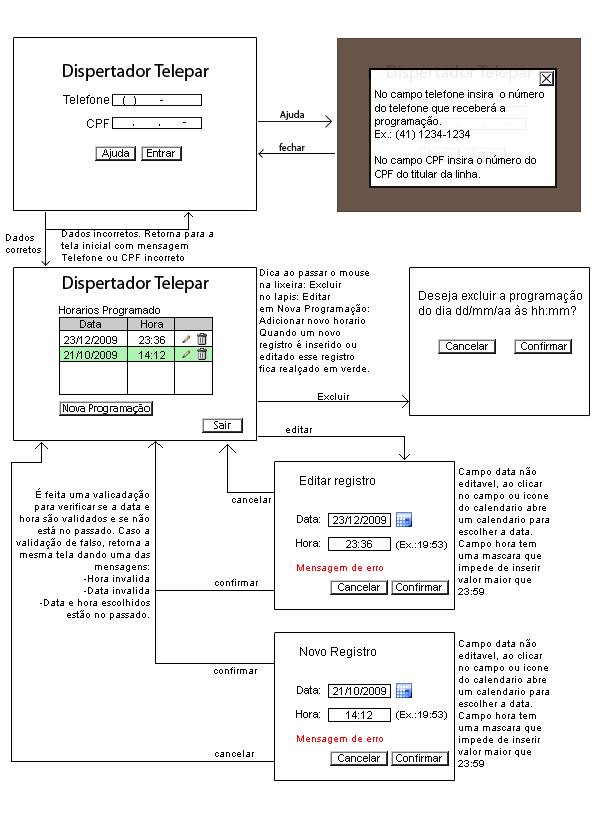
<style>
.page{position:relative;width:595px;height:822px;background:#ffffff}
.page>*{position:absolute;margin:0}
.t1{font:18px "MyriadPro-Regular";color:#000000}
.t2{font:11px "ArialMT";color:#000000}
.t3{font:12px/24px "ArialMT";color:#000000}
.t4{font:12px/24px "MyriadPro-Regular";color:#000000}
.t5{font:12px "MyriadPro-Regular";color:#000000}
.t6{font:10px "MyriadPro-Regular";color:#151414}
.t7{font:12px "MyriadPro-Regular";color:#ededed}
.t8{font:11px "MyriadPro-Regular";color:#ededed}
.t9{font:10px "ArialMT";color:#000000}
.t10{font:12px "ArialMT";color:#000000}
.t11{font:11px "MyriadPro-Regular";color:#000000}
.t12{font:11px/24px "ArialMT";color:#000000}
.t13{font:10px "ArialMT";color:#ff0000}
</style>
<div class="page">
<p class="t1" style="left:63px;top:64px;width:146px;height:17px">Dispertador Telepar</p>
<p class="t2" style="left:375px;top:89px;width:169px;height:89px">No campo telefone insira  o número do telefone que receberá a programação. <br>Ex.: (41) 1234-1234<br><br>No campo CPF insira o número do CPF do titular da linha.</p>
<p class="t3" style="left:63px;top:95px;width:46px;height:33px;text-align:right"><span class="t4"> </span>Telefone<br>CPF</p>
<p class="t5" style="left:123px;top:96px;width:40px;height:10px">(   )         -</p>
<p class="t6" style="left:280px;top:110px;width:24px;height:10px">Ajuda</p>
<p class="t5" style="left:133px;top:122px;width:53px;height:4px">.         .         -</p>
<p class="t7" style="left:457px;top:123px;width:53px;height:4px">.         .         -</p>
<p class="t2" style="left:102px;top:149px;width:27px;height:10px">Ajuda</p>
<p class="t2" style="left:147px;top:149px;width:28px;height:8px">Entrar</p>
<p class="t6" style="left:279px;top:143px;width:26px;height:8px">fechar</p>
<p class="t8" style="left:472px;top:150px;width:27px;height:8px">Entrar</p>
<p class="t9" style="left:61px;top:230px;width:152px;height:31px">Dados incorretos. Retorna para a tela inicial com mensagem Telefone ou CPF incorreto</p>
<p class="t9" style="left:6px;top:234px;width:35px;height:19px">Dados corretos</p>
<p class="t9" style="left:259px;top:269px;width:110px;height:106px">Dica ao passar o mouse<br>na lixeira: Excluir<br>no lapis: Editar<br>em Nova Programação: Adicionar novo horario<br>Quando um novo registro é inserido ou editado esse registro fica realçado em verde.</p>
<p class="t1" style="left:63px;top:276px;width:146px;height:17px">Dispertador Telepar</p>
<p class="t10" style="left:419px;top:290px;width:163px;height:25px">Deseja excluir a programação do dia dd/mm/aa às hh:mm?</p>
<p class="t2" style="left:59px;top:306px;width:101px;height:10px">Horarios Programado</p>
<p class="t2" style="left:80px;top:320px;width:83px;height:8px">Data             Hora</p>
<p class="t2" style="left:64px;top:336px;width:101px;height:8px">23/12/2009       23:36</p>
<p class="t2" style="left:446px;top:342px;width:42px;height:8px">Cancelar</p>
<p class="t2" style="left:521px;top:342px;width:46px;height:8px">Confirmar</p>
<p class="t2" style="left:64px;top:351px;width:101px;height:8px">21/10/2009       14:12</p>
<p class="t9" style="left:318px;top:393px;width:31px;height:7px">Excluir</p>
<p class="t11" style="left:63px;top:404px;width:87px;height:10px">Nova Programação</p>
<p class="t11" style="left:214px;top:421px;width:17px;height:8px">Sair</p>
<p class="t9" style="left:286px;top:426px;width:26px;height:7px">editar</p>
<p class="t9" style="left:458px;top:467px;width:91px;height:128px">Campo data não editavel, ao clicar no campo ou icone do calendario abre um calendario para escolher a data.<br>Campo hora tem uma mascara que impede de inserir valor maior que 23:59</p>
<p class="t10" style="left:300px;top:476px;width:75px;height:11px">Editar registro</p>
<p class="t9" style="left:16px;top:488px;width:134px;height:132px;text-align:right">É feita uma valicadação para verificar se a data e hora são validados e se não está no passado. Caso a validação de falso, retorna a mesma tela dando uma das mensagens:<br>-Hora invalida<br>-Data invalida<br>-Data e hora escolhidos estão no passado.</p>
<p class="t9" style="left:232px;top:496px;width:39px;height:7px">cancelar</p>
<p class="t12" style="left:296px;top:515px;width:24px;height:32px;text-align:right">Data:<br>Hora:</p>
<p class="t2" style="left:333px;top:516px;width:53px;height:8px">23/12/2009</p>
<p class="t2" style="left:346px;top:540px;width:26px;height:8px">23:36</p>
<p class="t9" style="left:396px;top:541px;width:51px;height:9px">(Ex.:19:53)</p>
<p class="t13" style="left:297px;top:564px;width:86px;height:9px">Mensagem de erro</p>
<p class="t9" style="left:215px;top:579px;width:43px;height:7px">confirmar</p>
<p class="t2" style="left:338px;top:583px;width:42px;height:8px">Cancelar</p>
<p class="t2" style="left:396px;top:583px;width:46px;height:8px">Confirmar</p>
<p class="t9" style="left:458px;top:639px;width:91px;height:128px">Campo data não editavel, ao clicar no campo ou icone do calendario abre um calendario para escolher a data.<br>Campo hora tem uma mascara que impede de inserir valor maior que 23:59</p>
<p class="t10" style="left:300px;top:647px;width:76px;height:11px">Novo Registro</p>
<p class="t9" style="left:214px;top:667px;width:43px;height:7px">confirmar</p>
<p class="t12" style="left:296px;top:686px;width:24px;height:32px;text-align:right">Data:<br>Hora:</p>
<p class="t2" style="left:333px;top:687px;width:53px;height:8px">21/10/2009</p>
<p class="t2" style="left:346px;top:711px;width:26px;height:8px">14:12</p>
<p class="t9" style="left:396px;top:711px;width:51px;height:9px">(Ex.:19:53)</p>
<p class="t13" style="left:297px;top:735px;width:86px;height:9px">Mensagem de erro</p>
<p class="t9" style="left:215px;top:750px;width:39px;height:7px">cancelar</p>
<p class="t2" style="left:338px;top:754px;width:42px;height:8px">Cancelar</p>
<p class="t2" style="left:396px;top:754px;width:46px;height:8px">Confirmar</p>
</div>
